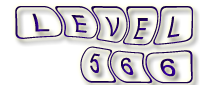
<style>
.page{position:relative;width:205px;height:85px;background:#ffffff}
.page>*{position:absolute;margin:0}
.t1{font:36px "SWGamekeysMT"}
</style>
<div class="page">
<p class="t1" style="left:15px;top:6px;width:178px;height:78px">LEVEL<br>    566</p>
</div>
